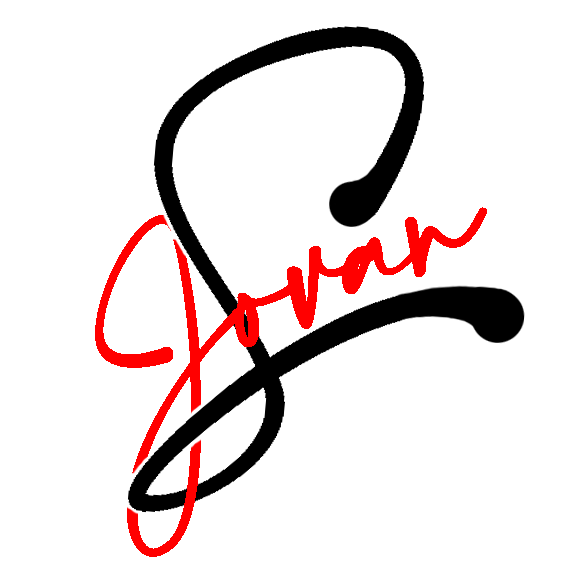
<style>
.page{position:relative;width:585px;height:585px;background:#ffffff}
.page>*{position:absolute;margin:0}
.t1{font:125px "AmalfiCoast";color:#ff0000;font-weight:bold;scale:0.9 1}
.t2{font:125px "AmalfiCoast";letter-spacing:-0.2em;color:#ff0000;font-weight:bold;scale:0.9 1}
</style>
<div class="page">
<p class="t1" style="left:95px;top:207px;width:392px;height:350px;rotate:-23deg">Jov<span class="t2">an</span></p>
</div>
